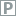
<style>
.page{position:relative;width:16px;height:16px;background:#ffffff}
.page>*{position:absolute;margin:0}
.t1{font:17.8px "MyriadPro-Bold";letter-spacing:0.02em;color:#909b9d}
</style>
<div class="page">
<p class="t1" style="left:4px;top:2px;width:9px;height:12px">P</p>
</div>
